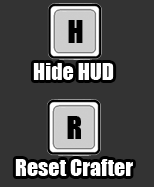
<style>
.page{position:relative;width:154px;height:187px;background:#333333}
.page>*{position:absolute;margin:0}
.t1{font:29.3px "Impact";color:#000000}
.t2{font:21.9px "Impact";color:#ffffff}
</style>
<div class="page">
<p class="t1" style="left:68px;top:20px;width:15px;height:23px">H</p>
<p class="t2" style="left:33px;top:63px;width:81px;height:17px">Hide HUD</p>
<p class="t1" style="left:67px;top:116px;width:14px;height:23px">R</p>
<p class="t2" style="left:15px;top:159px;width:118px;height:17px">Reset Crafter</p>
</div>
